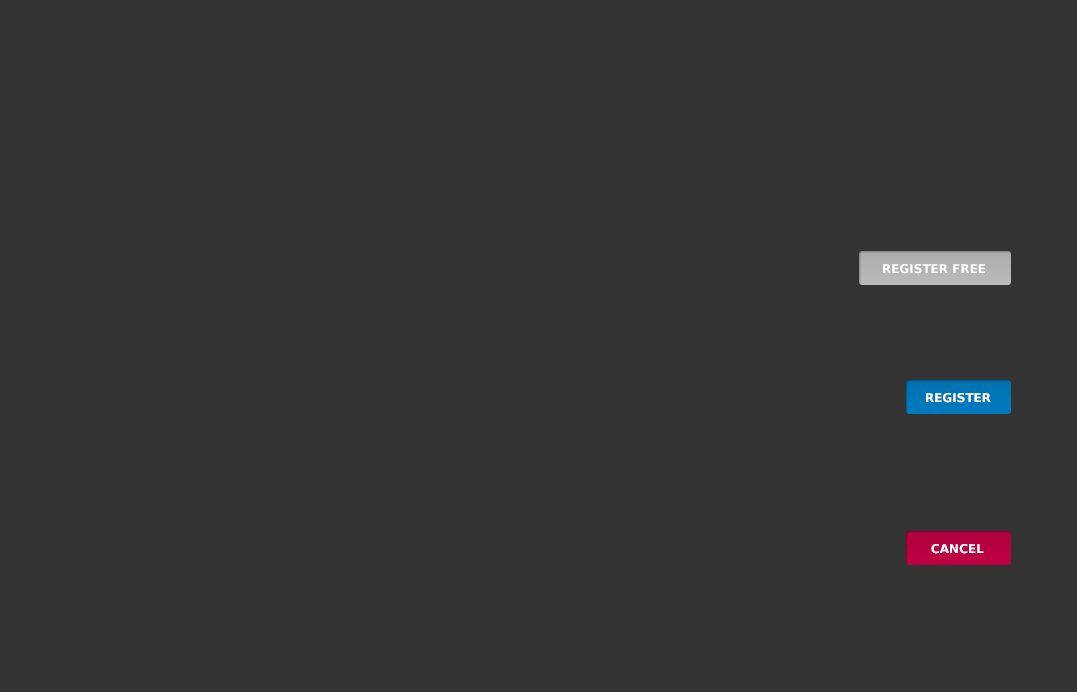
<style>
.page{position:relative;width:1077px;height:692px;background:#333333}
.page>*{position:absolute;margin:0}
.t1{font:12px "BitstreamVeraSans-Bold";color:#ffffff}
</style>
<div class="page">
<p class="t1" style="left:883px;top:264px;width:102px;height:10px">REGISTER FREE</p>
<p class="t1" style="left:926px;top:393px;width:65px;height:10px">REGISTER</p>
<p class="t1" style="left:931px;top:544px;width:53px;height:10px">CANCEL</p>
</div>
